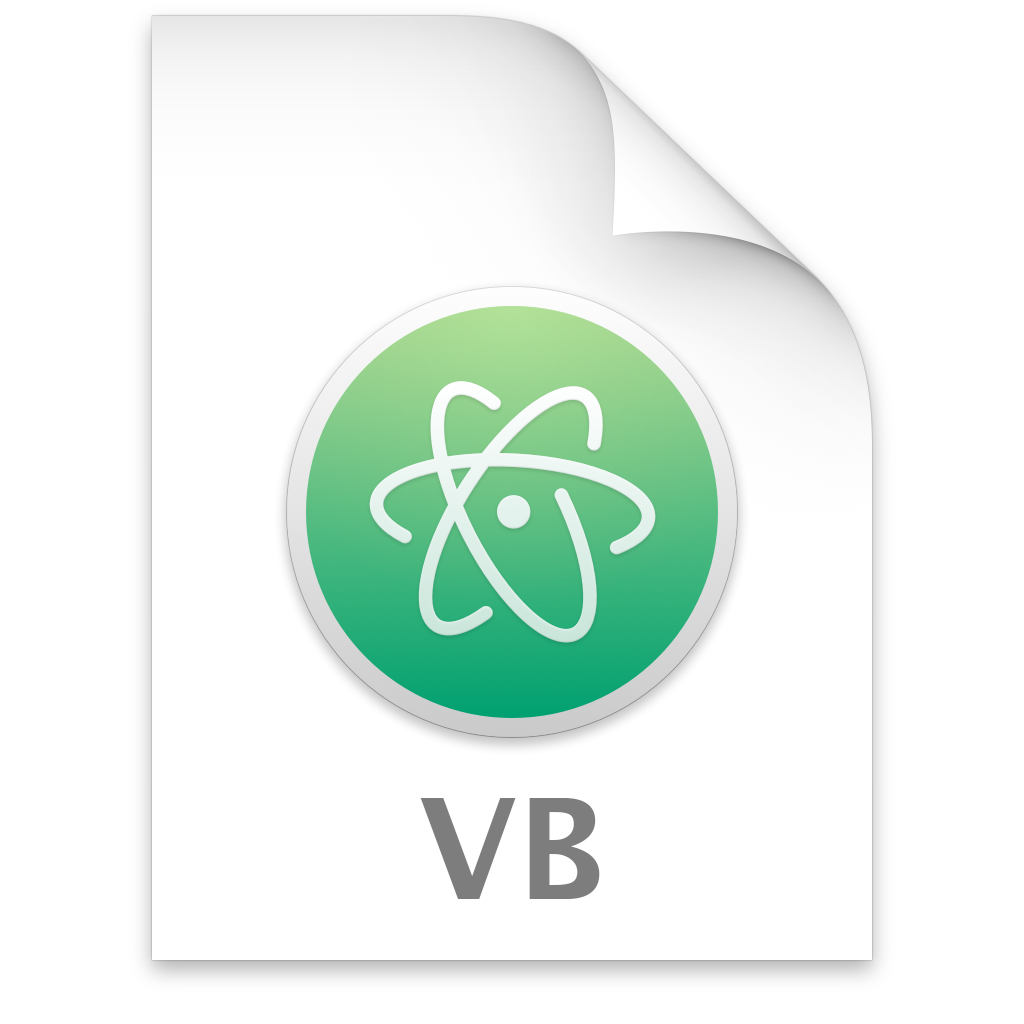
<style>
.page{position:relative;width:1024px;height:1024px;background:#ffffff}
.page>*{position:absolute;margin:0}
.t1{font:140px "LucidaGrande-Bold";color:#7d7d7d}
</style>
<div class="page">
<p class="t1" style="left:420px;top:798px;width:180px;height:101px">VB</p>
</div>
